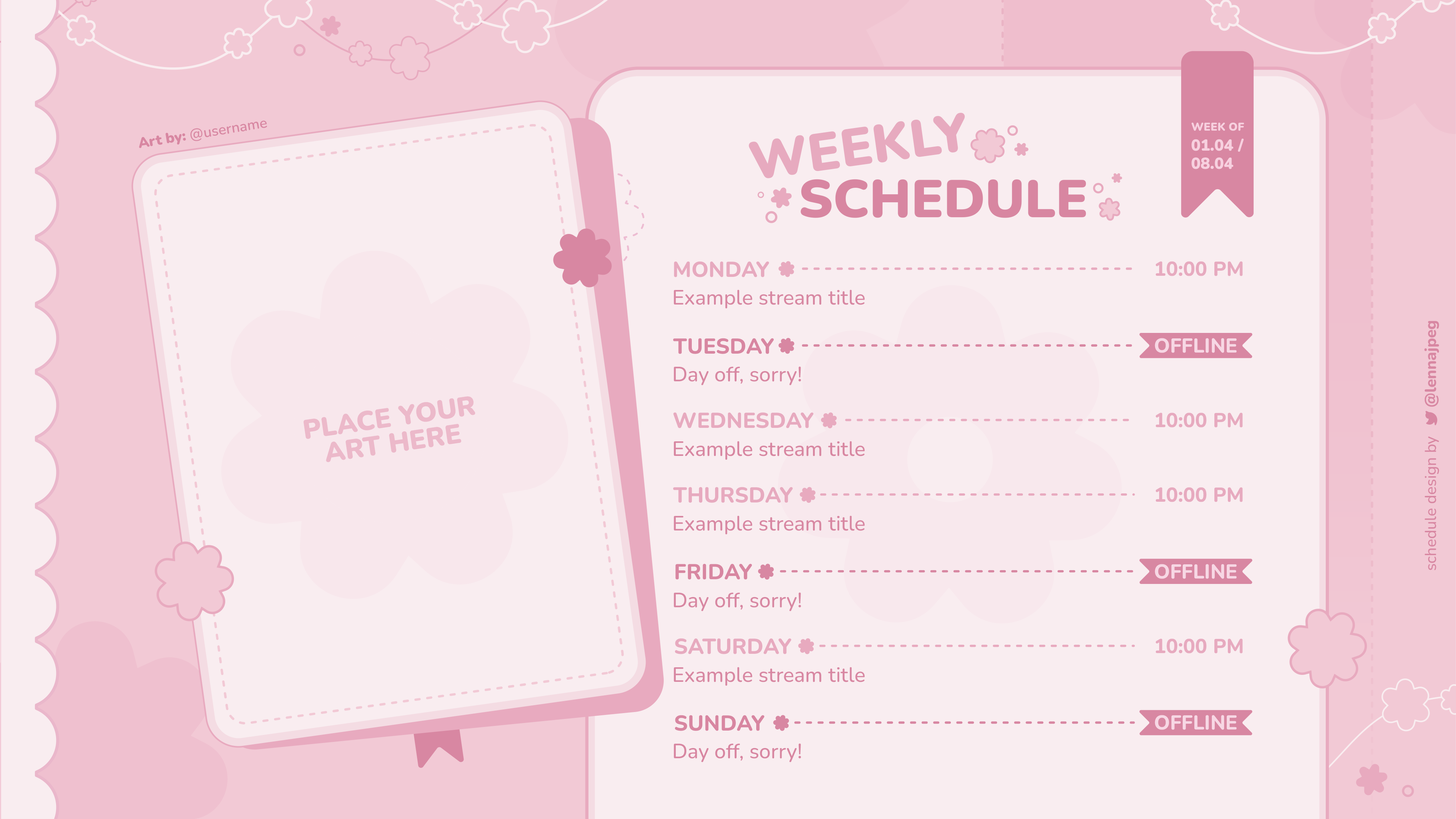
<style>
.page{position:relative;width:1456px;height:819px;background:#f9edf0}
.page>*{position:absolute;margin:0}
.t1{font:52.9px "Nunito-Black";color:#e8aabf;text-transform:uppercase}
.t2{font:14.4px "Nunito-SemiBold";color:#d887a2}
.t3{font:14.4px "Nunito-Black";color:#d887a2}
.t4{font:11.2px "Nunito-Black";color:#f7d0df;text-transform:uppercase}
.t5{font:15.9px/18.2px "Nunito-Black";color:#f7d0df;text-transform:uppercase}
.t6{font:52.9px "Nunito-Black";color:#d887a2;text-transform:uppercase}
.t7{font:21.5px "Nunito-ExtraBold";color:#e8aabf}
.t8{font:20.1px "Nunito-ExtraBold";color:#e8aabf}
.t9{font:20.6px "Nunito-Medium";color:#d887a2}
.t10{font:21.5px "Nunito-ExtraBold";color:#d887a2;text-transform:uppercase}
.t11{font:20.1px "Nunito-ExtraBold";color:#f7d7e4}
.t12{font:21.5px "Nunito-ExtraBold";color:#e8aabf;text-transform:uppercase}
</style>
<div class="page">
<p class="t1" style="left:748px;top:113px;width:217px;height:65px">weekly</p>
<p class="t2" style="left:139px;top:120px;width:128px;height:28px;rotate:-9deg"><span class="t3">Art by:</span> @username</p>
<p class="t4" style="left:1191px;top:123px;width:53px;height:8px">WEEK OF</p>
<p class="t5" style="left:1191px;top:139px;width:53px;height:30px">01.04 /<br>08.04</p>
<p class="t6" style="left:801px;top:179px;width:285px;height:39px">Schedule</p>
<p class="t7" style="left:674px;top:261px;width:95px;height:16px">MONDAY</p>
<p class="t8" style="left:1156px;top:261px;width:87px;height:15px">10:00 PM</p>
<p class="t9" style="left:674px;top:290px;width:191px;height:19px">Example stream title</p>
<p class="t10" style="left:673px;top:338px;width:101px;height:16px">Tuesday</p>
<p class="t11" style="left:1155px;top:338px;width:81px;height:15px">OFFLINE</p>
<p class="t9" style="left:674px;top:366px;width:127px;height:19px">Day off, sorry!</p>
<p class="t12" style="left:673px;top:412px;width:141px;height:16px">Wednesday</p>
<p class="t8" style="left:1156px;top:413px;width:87px;height:15px">10:00 PM</p>
<p class="t9" style="left:674px;top:441px;width:191px;height:19px">Example stream title</p>
<p class="t12" style="left:673px;top:487px;width:120px;height:16px">Thursday</p>
<p class="t8" style="left:1156px;top:487px;width:87px;height:15px">10:00 PM</p>
<p class="t9" style="left:674px;top:516px;width:191px;height:19px">Example stream title</p>
<p class="t10" style="left:675px;top:564px;width:77px;height:16px">Friday</p>
<p class="t11" style="left:1155px;top:564px;width:81px;height:15px">OFFLINE</p>
<p class="t9" style="left:674px;top:592px;width:127px;height:19px">Day off, sorry!</p>
<p class="t12" style="left:675px;top:638px;width:116px;height:16px">Saturday</p>
<p class="t8" style="left:1156px;top:639px;width:87px;height:15px">10:00 PM</p>
<p class="t9" style="left:674px;top:667px;width:191px;height:19px">Example stream title</p>
<p class="t10" style="left:675px;top:715px;width:89px;height:16px">Sunday</p>
<p class="t11" style="left:1155px;top:715px;width:81px;height:15px">OFFLINE</p>
<p class="t9" style="left:674px;top:743px;width:127px;height:19px">Day off, sorry!</p>
</div>
